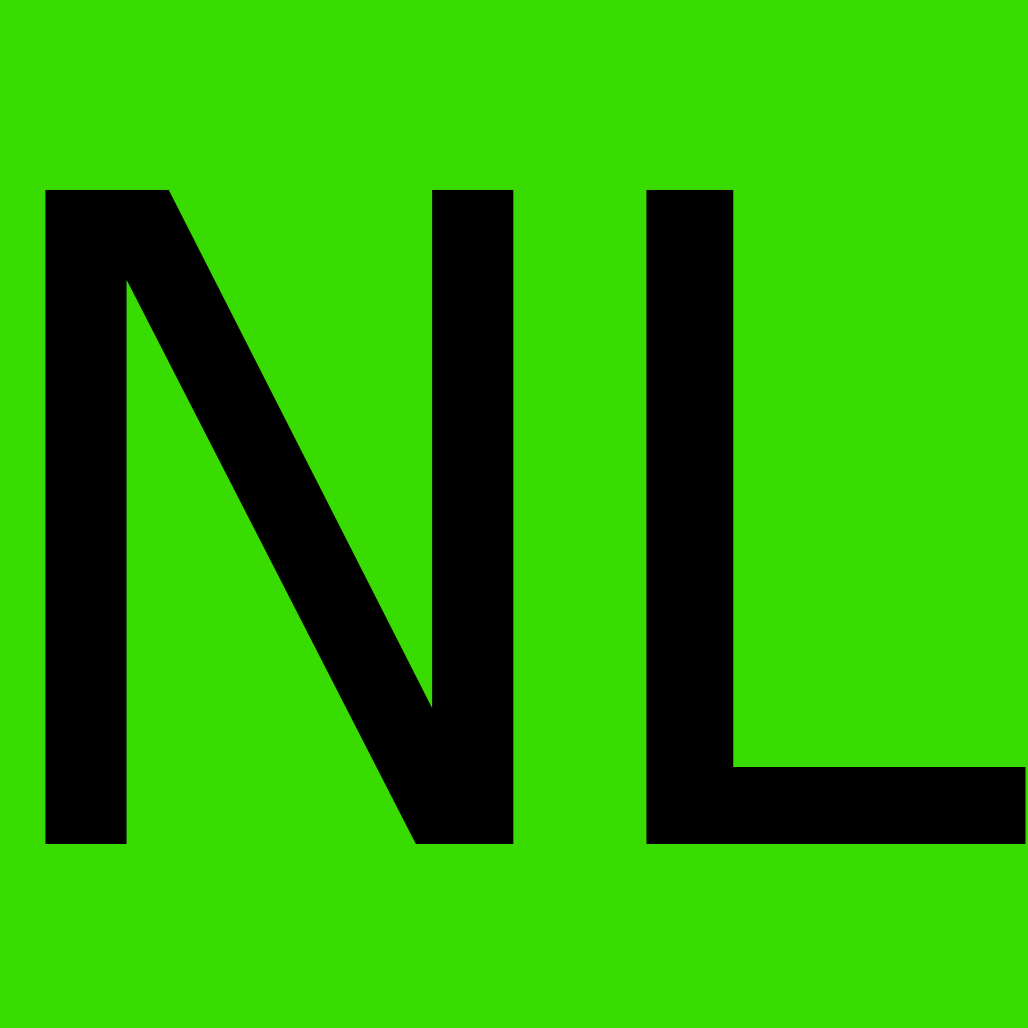
<style>
.page{position:relative;width:1028px;height:1028px;background:#39dc00}
.page>*{position:absolute;margin:0}
.t1{font:900px "Tahoma";color:#000000}
</style>
<div class="page">
<p class="t1" style="left:45px;top:189px;width:981px;height:655px">NL</p>
</div>
